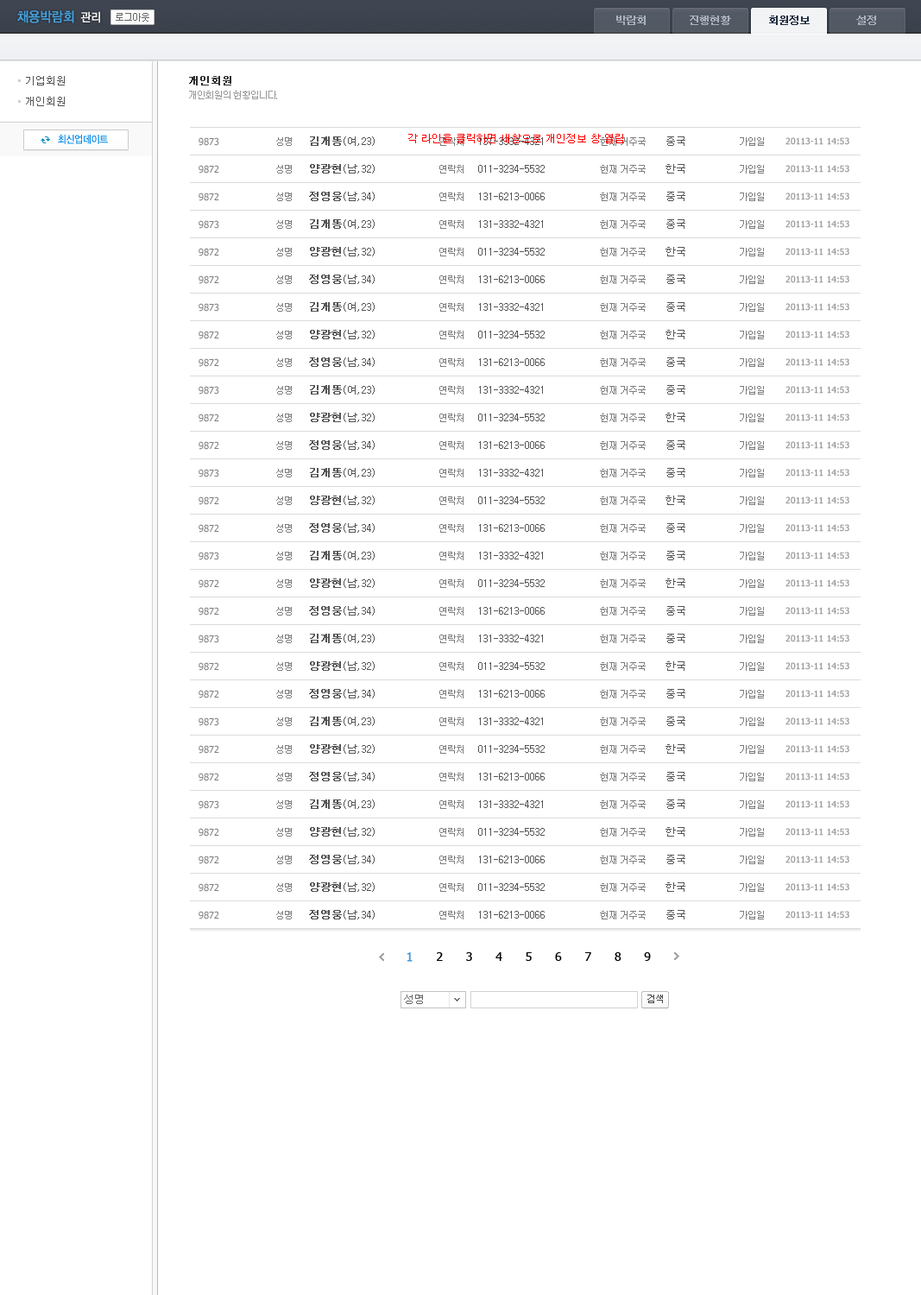
<style>
.page{position:relative;width:921px;height:1295px;background:#ffffff}
.page>*{position:absolute;margin:0}
.t1{font:13.8px "YDIYGO130-KSCpc-EUC-H";letter-spacing:-0.1em;color:#469fd9;font-weight:bold;scale:0.9 1}
.t2{font:12.1px "YDIYGO130-KSCpc-EUC-H";letter-spacing:-0.1em;color:#f0f0f0;font-weight:bold;scale:0.9 1}
.t3{font:10.4px "Dotum";letter-spacing:-0.1em;color:#aab1be;font-weight:bold}
.t4{font:10.4px "Dotum";letter-spacing:-0.1em;color:#212e40;font-weight:bold}
.t5{font:10.4px/20.7px "Dotum";color:#535353}
.t6{font:10.4px "Dotum";color:#2e2e2e;font-weight:bold}
.t7{font:9.5px "Dotum";letter-spacing:-0.1em;color:#999999}
.t8{font:10.4px "YDIYGO130-KSCpc-EUC-H";letter-spacing:-0.1em;color:#0188e7;scale:0.9 1}
.t9{font:9.5px "Tahoma";color:#7d7d7d}
.t10{font:9.5px "Dotum";letter-spacing:-0.1em;color:#7d7d7d}
.t11{font:10.4px "Dotum";color:#555555}
.t12{font:10.4px "Dotum";color:#555555;font-weight:bold}
.t13{font:10.4px "Dotum";color:#ff0000}
.t14{font:8.6px "Tahoma";color:#999999;font-weight:bold}
.t15{font:12.1px "Tahoma";letter-spacing:0.8em;color:#000000}
.t16{font:12.1px "Tahoma";letter-spacing:0.8em;color:#469ed9;font-weight:bold}
.t17{font:10.4px "Dotum";color:#666666}
</style>
<div class="page">
<p class="t1" style="left:17px;top:10px;width:57px;height:13px">채용박람회</p>
<p class="t2" style="left:80px;top:11px;width:20px;height:12px">관리</p>
<p class="t3" style="left:616px;top:16px;width:30px;height:9px">박람회</p>
<p class="t3" style="left:690px;top:16px;width:41px;height:9px">진행현황</p>
<p class="t4" style="left:769px;top:16px;width:41px;height:9px">회원정보</p>
<p class="t3" style="left:856px;top:16px;width:20px;height:9px">설정</p>
<p class="t5" style="left:26px;top:76px;width:39px;height:30px">기업회원<br>개인회원</p>
<p class="t6" style="left:189px;top:76px;width:42px;height:9px">개인회원</p>
<p class="t7" style="left:189px;top:91px;width:88px;height:8px">개인회원의 현황입니다.</p>
<p class="t8" style="left:58px;top:135px;width:50px;height:9px">최신업데이트</p>
<p class="t9" style="left:199px;top:137px;width:20px;height:9px">9873</p>
<p class="t10" style="left:276px;top:137px;width:16px;height:9px">성명</p>
<p class="t11" style="left:310px;top:136px;width:65px;height:10px"><span class="t12">김개똥</span>(여,23)</p>
<p class="t13" style="left:408px;top:134px;width:215px;height:9px">각 라인을 클릭하면 새창으로 개인정보 창 열림</p>
<p class="t10" style="left:439px;top:137px;width:25px;height:9px">연락처</p>
<p class="t11" style="left:479px;top:137px;width:64px;height:8px">131-3332-4321</p>
<p class="t10" style="left:600px;top:137px;width:46px;height:9px">현재 거주국</p>
<p class="t11" style="left:666px;top:136px;width:19px;height:10px">중국</p>
<p class="t10" style="left:740px;top:137px;width:24px;height:9px">가입일</p>
<p class="t14" style="left:785px;top:137px;width:64px;height:8px">20113-11 14:53</p>
<p class="t9" style="left:199px;top:165px;width:20px;height:8px">9872</p>
<p class="t10" style="left:276px;top:165px;width:16px;height:8px">성명</p>
<p class="t11" style="left:310px;top:164px;width:65px;height:9px"><span class="t12">양광현</span>(남,32)</p>
<p class="t10" style="left:439px;top:165px;width:25px;height:8px">연락처</p>
<p class="t11" style="left:478px;top:165px;width:67px;height:8px">011-3234-5532</p>
<p class="t10" style="left:600px;top:165px;width:46px;height:8px">현재 거주국</p>
<p class="t11" style="left:665px;top:164px;width:20px;height:9px">한국</p>
<p class="t10" style="left:740px;top:165px;width:24px;height:8px">가입일</p>
<p class="t14" style="left:785px;top:165px;width:64px;height:8px">20113-11 14:53</p>
<p class="t9" style="left:199px;top:192px;width:20px;height:9px">9872</p>
<p class="t10" style="left:276px;top:192px;width:16px;height:9px">성명</p>
<p class="t11" style="left:309px;top:192px;width:66px;height:9px"><span class="t12">정영웅</span>(남,34)</p>
<p class="t10" style="left:439px;top:192px;width:25px;height:9px">연락처</p>
<p class="t11" style="left:479px;top:192px;width:66px;height:8px">131-6213-0066</p>
<p class="t10" style="left:600px;top:192px;width:46px;height:9px">현재 거주국</p>
<p class="t11" style="left:666px;top:192px;width:19px;height:9px">중국</p>
<p class="t10" style="left:740px;top:192px;width:24px;height:9px">가입일</p>
<p class="t14" style="left:785px;top:192px;width:64px;height:8px">20113-11 14:53</p>
<p class="t15" style="left:407px;top:952px;width:244px;height:10px"><span class="t16">1</span> 2 3 4 5 6 7 8 9</p>
<p class="t17" style="left:404px;top:994px;width:19px;height:10px">성명</p>
</div>
